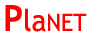
<style>
.page{position:relative;width:92px;height:37px;background:#ffffff}
.page>*{position:absolute;margin:0}
.t1{font:24px "TrebuchetMS";color:#ff0000;scale:0.95 1}
.t2{font:36px "TrebuchetMS-Bold";color:#ff0000;scale:0.95 1}
.t3{font:30px "TrebuchetMS";color:#ff0000;scale:0.95 1}
</style>
<div class="page">
<p class="t1" style="left:5px;top:5px;width:82px;height:27px"><span class="t2">P</span><span class="t3">la</span>NET</p>
</div>
